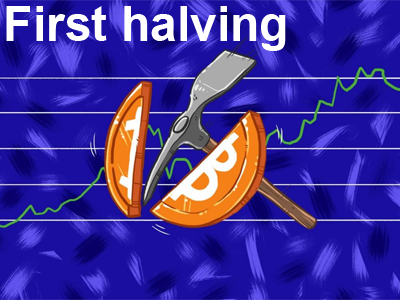
<style>
.page{position:relative;width:400px;height:300px;background:#1a0ea0}
.page>*{position:absolute;margin:0}
.t1{font:48px "Arial-BoldMT";color:#ffffff}
</style>
<div class="page">
<p class="t1" style="left:6px;top:6px;width:280px;height:45px">First halving</p>
</div>
